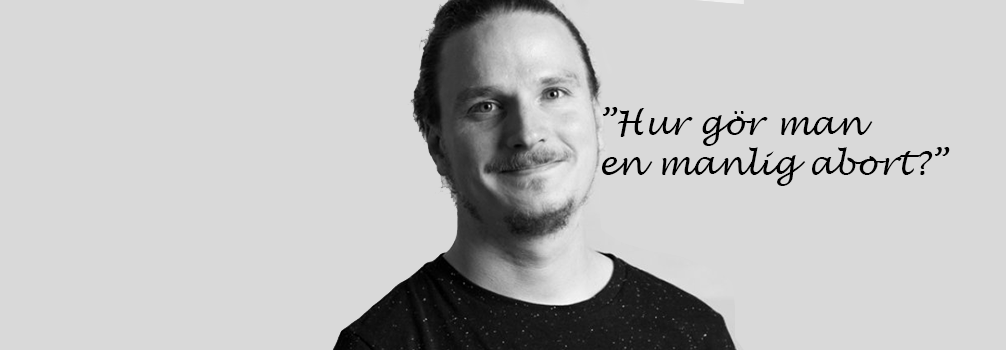
<style>
.page{position:relative;width:1006px;height:350px;background:#d9d9d9}
.page>*{position:absolute;margin:0}
.t1{font:33.3px "LucidaHandwriting-Italic";color:#000000}
</style>
<div class="page">
<p class="t1" style="left:602px;top:107px;width:348px;height:79px">”Hur gör man<br>en manlig abort?”</p>
</div>
